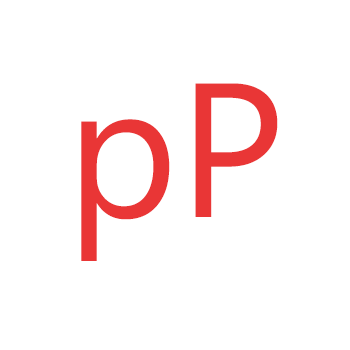
<style>
.page{position:relative;width:350px;height:350px;background:#ffffff}
.page>*{position:absolute;margin:0}
.t1{font:190.6px "SegoeUIHistoric";color:#e93636}
</style>
<div class="page">
<p class="t1" style="left:81px;top:83px;width:197px;height:178px">pP</p>
</div>
